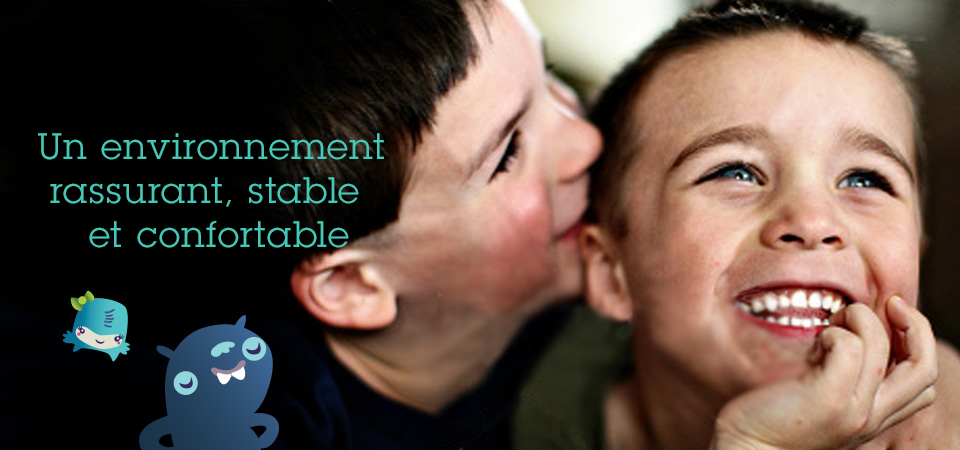
<style>
.page{position:relative;width:960px;height:450px}
.page>*{position:absolute;margin:0}
.t1{font:36px/44px "LubalinGraphStd-Book";letter-spacing:0.058em;color:#47c8b6}
</style>
<div class="page">
<p class="t1" style="left:38px;top:133px;width:346px;height:115px">Un environnement<br> rassurant, stable<br>    et confortable</p>
</div>
